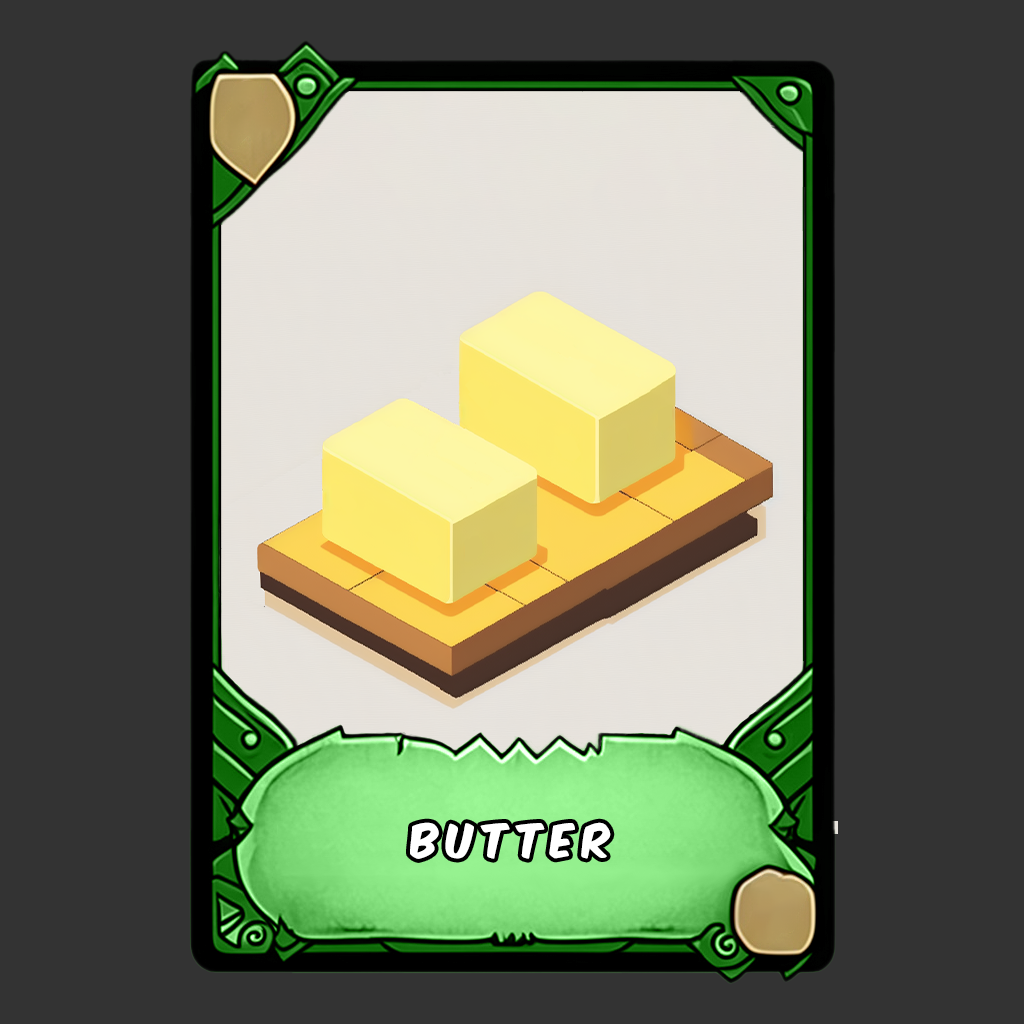
<style>
.page{position:relative;width:1024px;height:1024px;background:#333333}
.page>*{position:absolute;margin:0}
.t1{font:40px "KomikaAxis";letter-spacing:0.2em;color:#ffffff}
</style>
<div class="page">
<p class="t1" style="left:410px;top:822px;width:201px;height:37px">butter</p>
</div>
